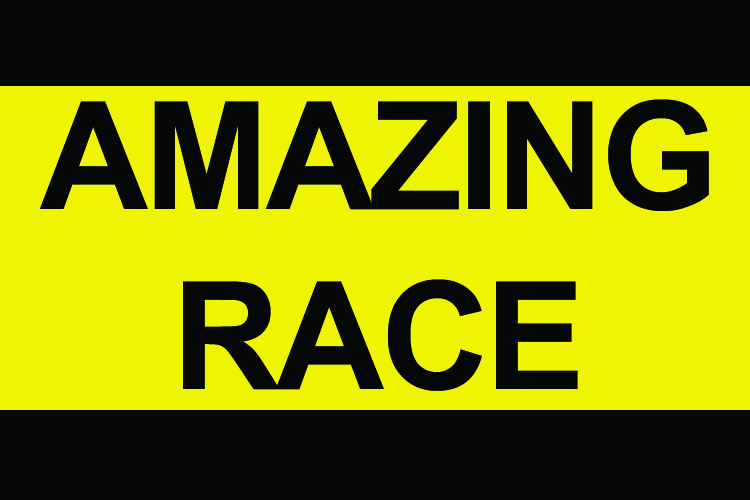
<style>
.page{position:relative;width:750px;height:500px;background:#eff400}
.page>*{position:absolute;margin:0}
.t1{font:150px "Arial-BoldMT";letter-spacing:-0.025em;color:#060808}
</style>
<div class="page">
<p class="t1" style="left:39px;top:99px;width:670px;height:292px;text-align:center">AMAZING RACE</p>
</div>
